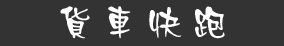
<style>
.page{position:relative;width:284px;height:46px;background:#333333}
.page>*{position:absolute;margin:0}
.t1{font:38.8px "¾­µä·±¹ã¸æ Regular";letter-spacing:0.15em;color:#ffffff}
</style>
<div class="page">
<p class="t1" style="left:60px;top:6px;width:165px;height:33px">货车快跑</p>
</div>
